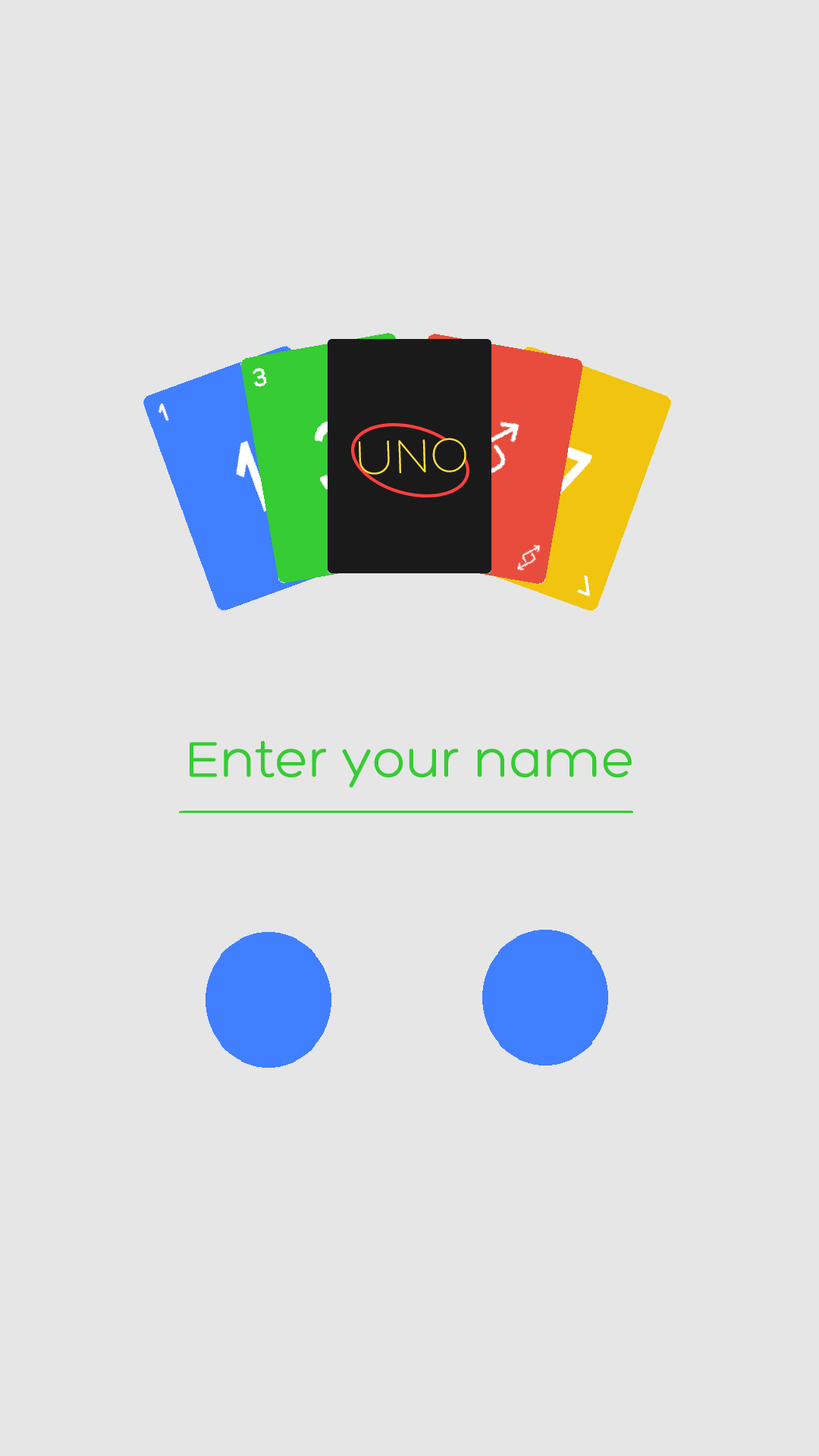
<style>
.page{position:relative;width:819px;height:1456px;background:#e6e6e6}
.page>*{position:absolute;margin:0}
.t1{font:54.6px "Hero-Regular";color:#36cc33}
</style>
<div class="page">
<p class="t1" style="left:190px;top:741px;width:442px;height:47px">Enter your name</p>
</div>
